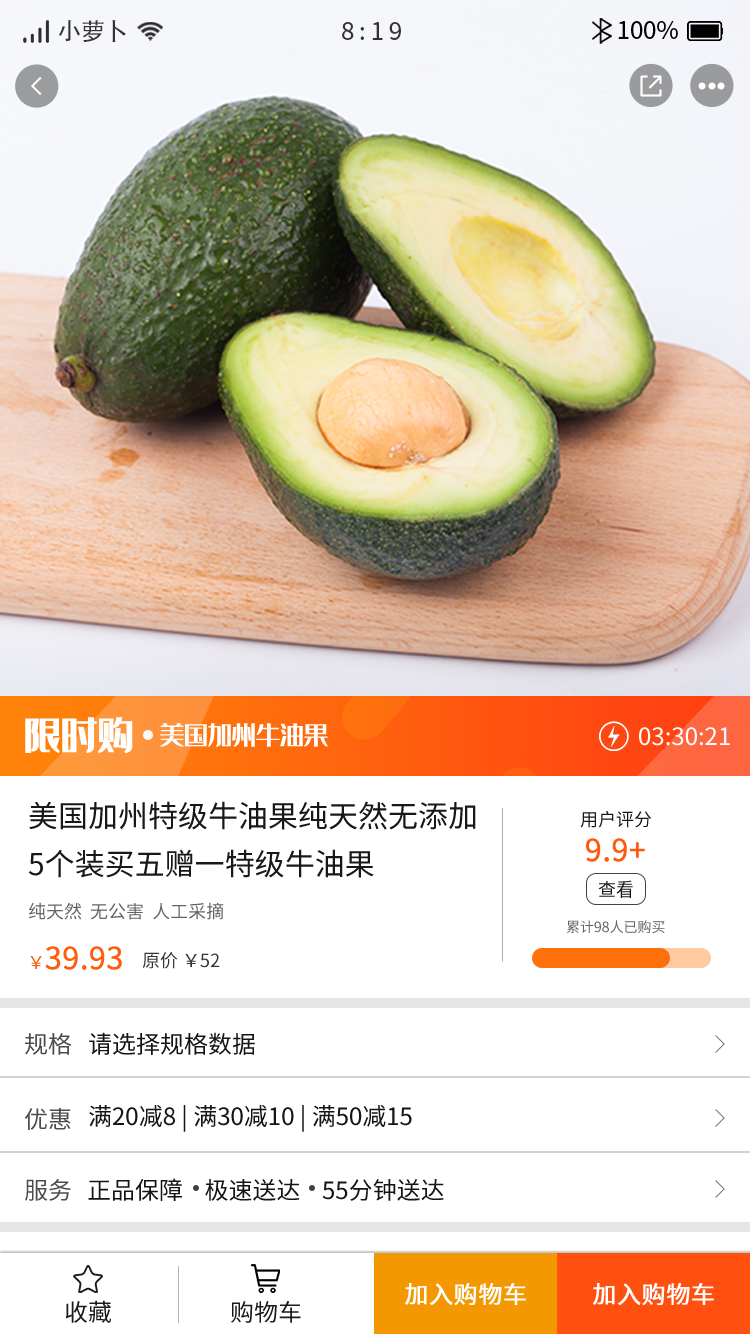
<style>
.page{position:relative;width:750px;height:1334px;background:#ffffff}
.page>*{position:absolute;margin:0}
.t1{font:24px "AdobeHeitiStd-Regular";color:#333333}
.t2{font:24px "SourceHanSansCN-Regular";letter-spacing:0.2em;color:#333333}
.t3{font:24px "SourceHanSansCN-Regular";color:#000000}
.t4{font:36px "35--Regular";color:#ffffff;font-weight:bold}
.t5{font:24px "35--Regular";color:#ffffff}
.t6{font:24px "SourceHanSansCN-Regular";color:#ffffff}
.t7{font:30px/48px "SourceHanSansCN-Regular";color:#181818}
.t8{font:18px "SourceHanSansCN-Regular";color:#181818}
.t9{font:30px "SourceHanSansCN-Regular";color:#ff580f;font-weight:bold}
.t10{font:18px "SourceHanSansCN-Regular";color:#636363}
.t11{font:14px "SourceHanSansCN-Regular";color:#636363}
.t12{font:30px "SourceHanSansCN-Regular";color:#ff5c0f;font-weight:bold}
.t13{font:18px "SourceHanSansCN-Regular";color:#ff5c0f}
.t14{font:18px "SourceHanSansCN-Regular";color:#353535}
.t15{font:24px "SourceHanSansCN-Regular";color:#4c4c4c}
.t16{font:24px "SourceHanSansCN-Regular";color:#151515}
.t17{font:24px "SourceHanSansCN-Regular";color:#ffffff;font-weight:bold}
.t18{font:24px "SourceHanSansCN-Regular";color:#1b1b1b}
</style>
<div class="page">
<p class="t1" style="left:58px;top:20px;width:68px;height:22px">小萝卜</p>
<p class="t2" style="left:342px;top:22px;width:59px;height:18px">8:19</p>
<p class="t3" style="left:618px;top:21px;width:60px;height:18px">100%</p>
<p class="t4" style="left:25px;top:717px;width:108px;height:36px">限时购</p>
<p class="t5" style="left:160px;top:723px;width:168px;height:24px">美国加州牛油果</p>
<p class="t6" style="left:639px;top:727px;width:91px;height:19px">03:30:21</p>
<p class="t7" style="left:28px;top:801px;width:448px;height:77px">美国加州特级牛油果纯天然无添加<br>5个装买五赠一特级牛油果</p>
<p class="t8" style="left:580px;top:811px;width:72px;height:17px">用户评分</p>
<p class="t9" style="left:586px;top:838px;width:59px;height:24px">9.9+</p>
<p class="t8" style="left:598px;top:880px;width:35px;height:18px">查看</p>
<p class="t10" style="left:29px;top:902px;width:195px;height:18px">纯天然  无公害  人工采摘</p>
<p class="t11" style="left:566px;top:920px;width:99px;height:13px">累计98人已购买</p>
<p class="t12" style="left:30px;top:946px;width:92px;height:24px"><span class="t13">￥</span>39.93</p>
<p class="t14" style="left:142px;top:952px;width:78px;height:17px">原价 ￥52</p>
<p class="t15" style="left:25px;top:1033px;width:47px;height:22px">规格</p>
<p class="t16" style="left:89px;top:1032px;width:166px;height:23px">请选择规格数据</p>
<p class="t15" style="left:25px;top:1108px;width:46px;height:22px">优惠</p>
<p class="t16" style="left:89px;top:1105px;width:323px;height:27px">满20减8 | 满30减10 | 满50减15</p>
<p class="t15" style="left:25px;top:1179px;width:46px;height:22px">服务</p>
<p class="t16" style="left:88px;top:1178px;width:356px;height:23px">正品保障    极速送达    55分钟送达</p>
<p class="t17" style="left:405px;top:1283px;width:121px;height:22px">加入购物车</p>
<p class="t17" style="left:593px;top:1283px;width:121px;height:22px">加入购物车</p>
<p class="t18" style="left:65px;top:1300px;width:46px;height:23px">收藏</p>
<p class="t18" style="left:231px;top:1301px;width:70px;height:22px">购物车</p>
</div>
